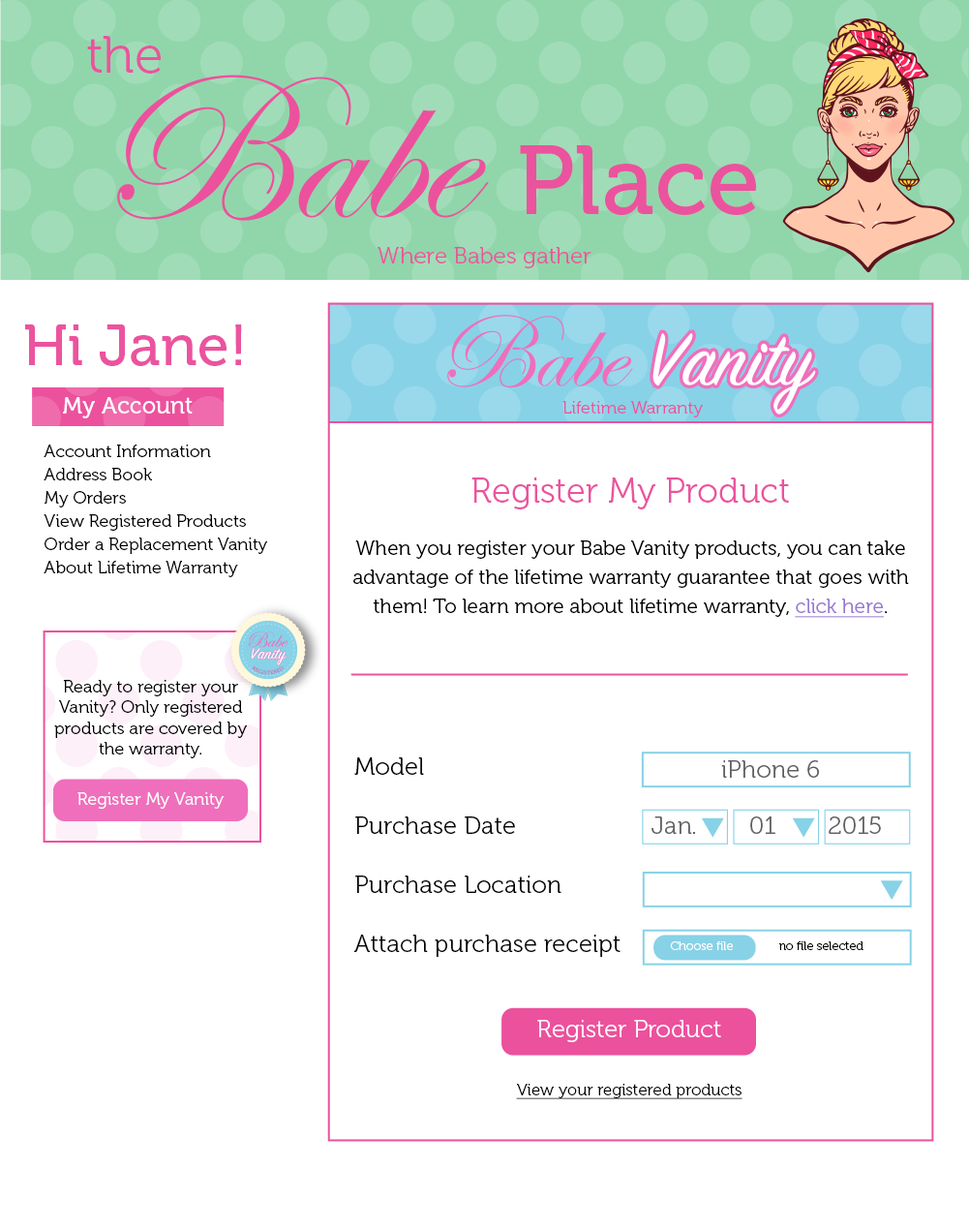
<style>
.page{position:relative;width:969px;height:1230px;background:#ffffff}
.page>*{position:absolute;margin:0}
.t1{font:52.2px "Museo-300";color:#eb539e}
.t2{font:98px "Museo-500";color:#eb539e}
.t3{font:23.2px "Museo-300";color:#eb539e}
.t4{font:58.1px "Museo-500";color:#eb539e}
.t5{font:23.2px "Museo-500";color:#ffffff}
.t6{font:17.4px "Museo-300";color:#eb539e}
.t7{font:17.4px/23.2px "Museo-300";color:#000000}
.t8{font:20.3px/29.1px "Museo-300";color:#000000}
.t9{font:34.9px "Museo-300";color:#eb539e}
.t10{font:20.3px/23.2px "Museo-300";color:#000000}
.t11{font:20.3px/29.1px "Museo-300";color:#9778d3;text-decoration:underline}
.t12{font:17.4px "Museo-300";color:#000000}
.t13{font:24.6px "Museo-300";color:#000000}
.t14{font:24.6px "Museo-300";color:#5f6062}
.t15{font:17.4px "Museo-300";color:#ffffff}
.t16{font:12.3px "Museo-300";color:#ffffff}
.t17{font:12.3px "Museo-300";color:#000000}
.t18{font:24.6px "Museo-300";color:#ffffff}
.t19{font:16.4px "Museo-300";color:#000000;text-decoration:underline}
</style>
<div class="page">
<p class="t1" style="left:87px;top:36px;width:74px;height:38px">the</p>
<p class="t2" style="left:520px;top:144px;width:236px;height:72px">Place</p>
<p class="t3" style="left:378px;top:247px;width:214px;height:21px">Where Babes gather</p>
<p class="t4" style="left:25px;top:324px;width:217px;height:42px">Hi Jane!</p>
<p class="t5" style="left:63px;top:397px;width:130px;height:21px">My Account</p>
<p class="t6" style="left:563px;top:401px;width:140px;height:16px">Lifetime Warranty</p>
<p class="t7" style="left:44px;top:445px;width:223px;height:132px">Account Information<br>Address Book<br>My Orders<br>View Registered Products<br>Order a Replacement Vanity<br>About Lifetime Warranty</p>
<p class="t8" style="left:354px;top:477px;width:555px;height:141px;text-align:center"><span class="t9">Register My Product<br><br></span><span class="t10">When you register your Babe Vanity products, you can </span>take advantage of the lifetime warranty guarantee that goes with them! To learn more about lifetime warranty, <span class="t11">click here</span>.</p>
<p class="t12" style="left:54px;top:680px;width:193px;height:78px;text-align:center">Ready to register your Vanity? Only registered products are covered by the warranty.</p>
<p class="t13" style="left:354px;top:757px;width:267px;height:200px">Model<br><br>Purchase Date<br><br>Purchase Location<br><br>Attach purchase receipt</p>
<p class="t14" style="left:722px;top:760px;width:97px;height:18px">iPhone 6</p>
<p class="t15" style="left:77px;top:792px;width:147px;height:17px">Register My Vanity</p>
<p class="t14" style="left:652px;top:816px;width:43px;height:18px">Jan.</p>
<p class="t14" style="left:751px;top:816px;width:25px;height:18px">01</p>
<p class="t14" style="left:829px;top:816px;width:52px;height:18px">2015</p>
<p class="t16" style="left:670px;top:941px;width:63px;height:9px">Choose file</p>
<p class="t17" style="left:780px;top:941px;width:84px;height:9px">no file selected</p>
<p class="t18" style="left:538px;top:1020px;width:184px;height:22px">Register Product</p>
<p class="t19" style="left:516px;top:1084px;width:227px;height:15px">View your registered products</p>
</div>
